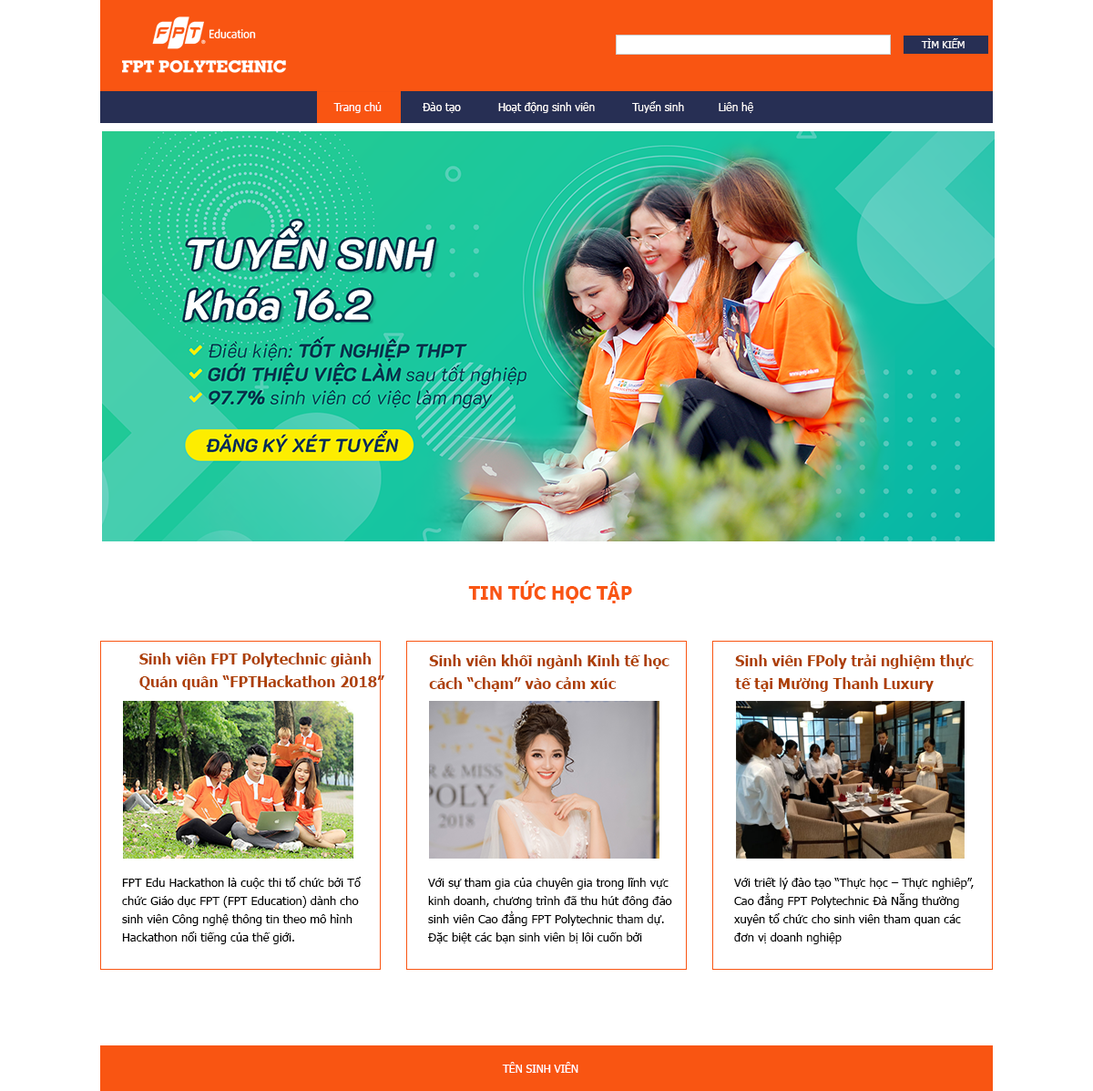
<style>
.page{position:relative;width:1093px;height:1091px;background:#ffffff}
.page>*{position:absolute;margin:0}
.t1{font:10px "Tahoma";color:#fefbfb}
.t2{font:10.9px "Tahoma";color:#fefbfb}
.t3{font:18.2px "Tahoma-Bold";color:#f95512}
.t4{font:14.6px/22.8px "Tahoma-Bold";color:#ad3f00}
.t5{font:11.8px/18.2px "Tahoma";color:#000000}
.t6{font:10.9px "Tahoma";color:#ffffff}
</style>
<div class="page">
<p class="t1" style="left:921px;top:38px;width:44px;height:10px">TÌM KIẾM</p>
<p class="t2" style="left:333px;top:101px;width:421px;height:12px">Trang chủ            Đào tạo           Hoạt động sinh viên           Tuyển sinh          Liên hệ</p>
<p class="t3" style="left:468px;top:580px;width:164px;height:23px">TIN TỨC HỌC TẬP</p>
<p class="t4" style="left:139px;top:652px;width:245px;height:38px">Sinh viên FPT Polytechnic giành <br>Quán quân “FPTHackathon 2018”</p>
<p class="t4" style="left:429px;top:654px;width:241px;height:38px">Sinh viên khối ngành Kinh tế học <br>cách “chạm” vào cảm xúc</p>
<p class="t4" style="left:735px;top:654px;width:239px;height:38px">Sinh viên FPoly trải nghiệm thực <br>tế tại Mường Thanh Luxury</p>
<p class="t5" style="left:122px;top:877px;width:240px;height:67px">FPT Edu Hackathon là cuộc thi tổ chức bởi Tổ <br>chức Giáo dục FPT (FPT Education) dành cho <br>sinh viên Công nghệ thông tin theo mô hình <br>Hackathon nổi tiếng của thế giới.</p>
<p class="t5" style="left:427px;top:877px;width:245px;height:66px">Với sự tham gia của chuyên gia trong lĩnh vực <br>kinh doanh, chương trình đã thu hút đông đảo <br>sinh viên Cao đẳng FPT Polytechnic tham dự. <br>Đặc biệt các bạn sinh viên bị lôi cuốn bởi</p>
<p class="t5" style="left:733px;top:877px;width:241px;height:67px">Với triết lý đào tạo “Thực học – Thực nghiêp”, <br>Cao đẳng FPT Polytechnic Đà Nẵng thường <br>xuyên tổ chức cho sinh viên tham quan các <br>đơn vị doanh nghiệp</p>
<p class="t6" style="left:502px;top:1061px;width:77px;height:11px">TÊN SINH VIÊN</p>
</div>
